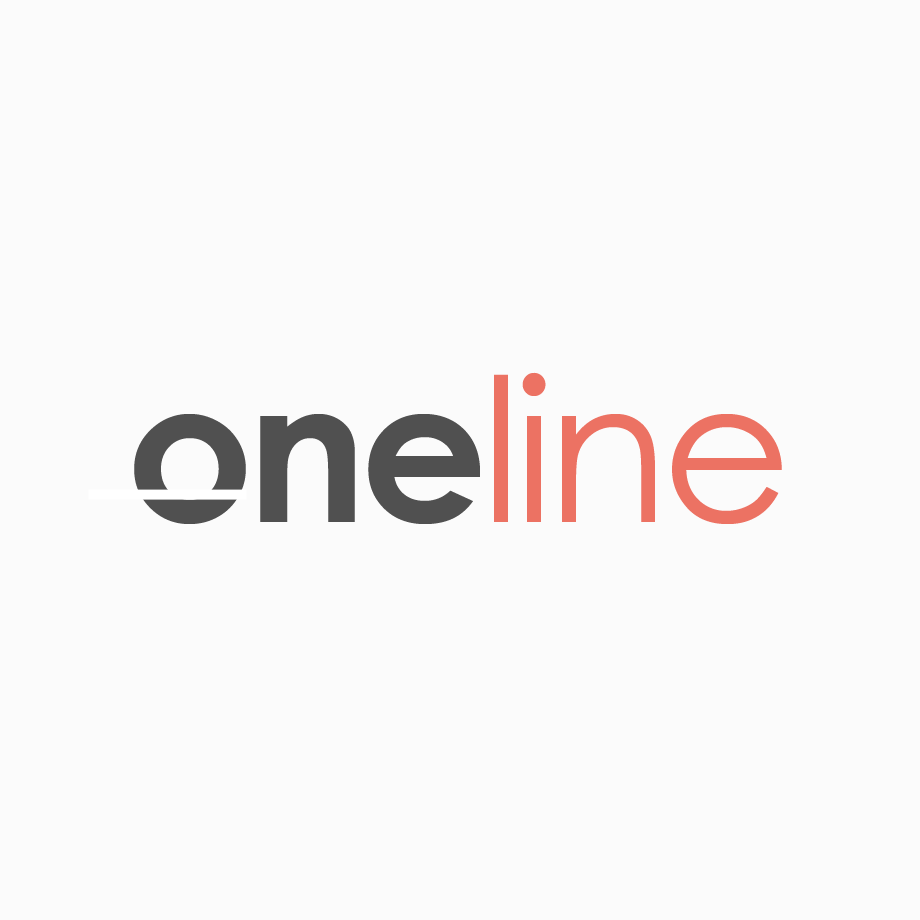
<style>
.page{position:relative;width:920px;height:920px;background:#fbfbfb}
.page>*{position:absolute;margin:0}
.t1{font:200px "CenturyGothic";letter-spacing:-0.035em;color:#ec7263}
.t2{font:200px "CenturyGothic-Bold";letter-spacing:-0.035em;color:#505050}
</style>
<div class="page">
<p class="t1" style="left:134px;top:372px;width:648px;height:152px"><span class="t2">one</span>line</p>
</div>
